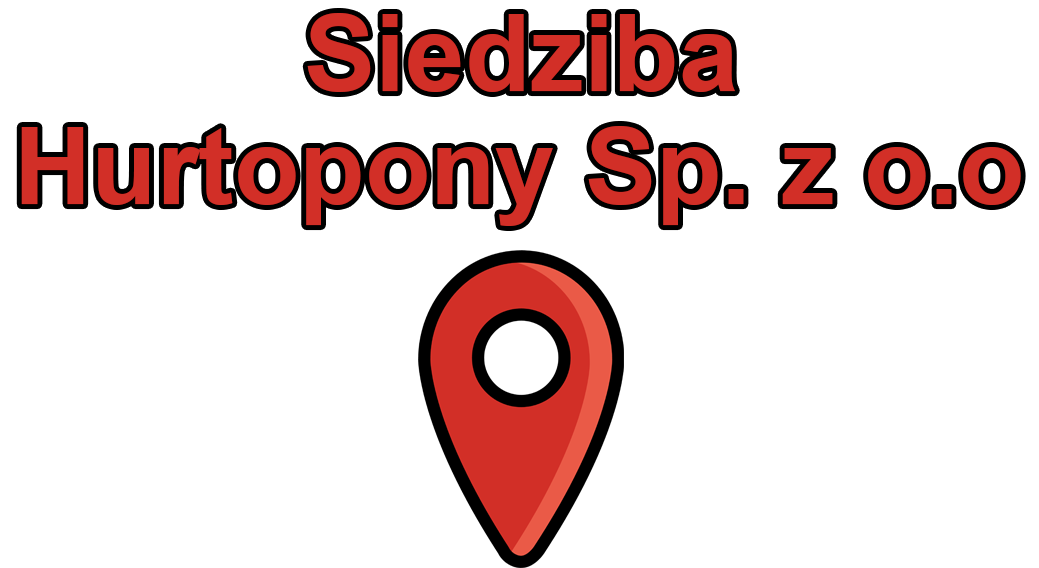
<style>
.page{position:relative;width:1039px;height:568px;background:#ffffff}
.page>*{position:absolute;margin:0}
.t1{font:107px "Arial-BoldMT";color:#d22f27}
</style>
<div class="page">
<p class="t1" style="left:307px;top:13px;width:428px;height:79px">Siedziba</p>
<p class="t1" style="left:21px;top:126px;width:1000px;height:100px">Hurtopony Sp. z o.o</p>
</div>
